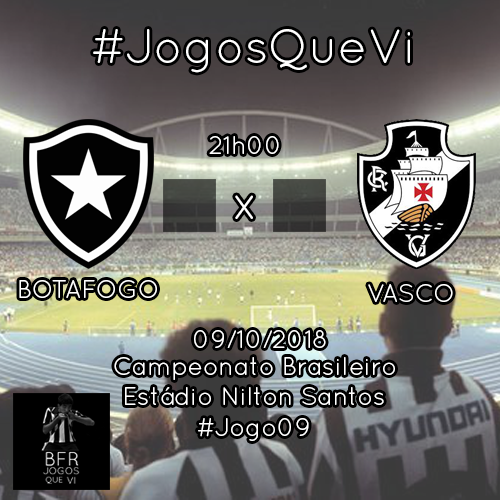
<style>
.page{position:relative;width:500px;height:500px}
.page>*{position:absolute;margin:0}
.t1{font:48px "QuicksandBook-Regular";color:#ffffff}
.t2{font:25px "QuicksandBook-Regular";color:#ffffff}
</style>
<div class="page">
<p class="t1" style="left:93px;top:29px;width:317px;height:44px">#JogosQueVi</p>
<p class="t2" style="left:209px;top:136px;width:70px;height:18px">21h00</p>
<p class="t1" style="left:235px;top:195px;width:18px;height:24px">x</p>
<p class="t2" style="left:19px;top:280px;width:138px;height:18px">BOTAFOGO</p>
<p class="t2" style="left:368px;top:284px;width:85px;height:18px">VASCO</p>
<p class="t2" style="left:194px;top:330px;width:132px;height:18px">09/10/2018</p>
<p class="t2" style="left:114px;top:357px;width:281px;height:23px">Campeonato Brasileiro</p>
<p class="t2" style="left:125px;top:387px;width:259px;height:18px">Estádio Nilton Santos</p>
<p class="t2" style="left:198px;top:418px;width:111px;height:23px">#Jogo09</p>
</div>
